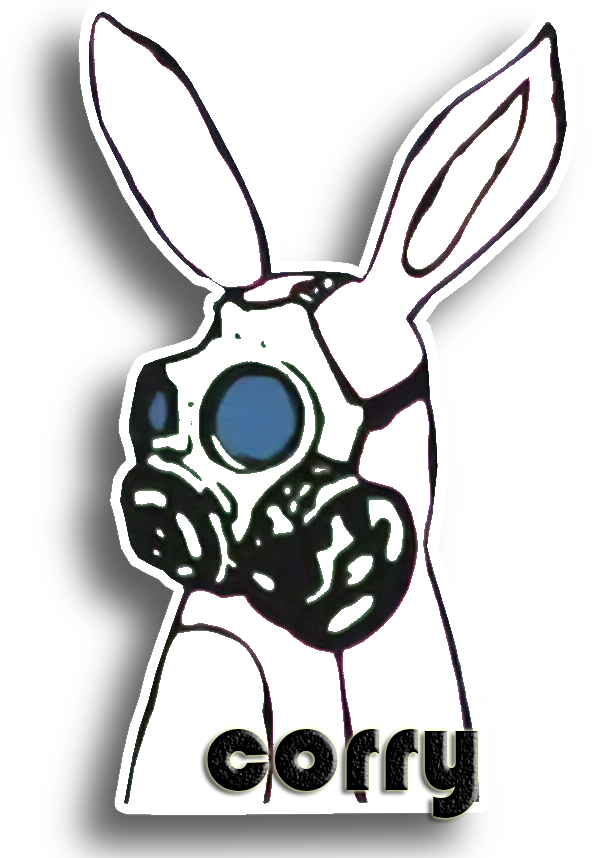
<style>
.page{position:relative;width:592px;height:858px;background:#ffffff}
.page>*{position:absolute;margin:0}
.t1{font:121.8px "Bauhaus93";color:#000000}
</style>
<div class="page">
<p class="t1" style="left:207px;top:729px;width:271px;height:89px">corry</p>
</div>
